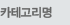
<style>
.page{position:relative;width:70px;height:25px;background:#e1e4e6}
.page>*{position:absolute;margin:0}
.t1{font:12px "YDIYGO340";letter-spacing:-0.025em;color:#666666;scale:0.97 1}
</style>
<div class="page">
<p class="t1" style="left:0px;top:6px;width:52px;height:12px">카테고리명</p>
</div>
